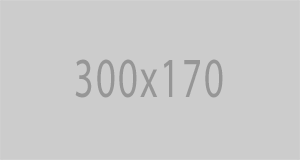
<style>
.page{position:relative;width:300px;height:160px;background:#cccccc}
.page>*{position:absolute;margin:0}
.t1{font:57px "MyriadPro-Regular";letter-spacing:0.07em;color:#969696;scale:0.68 1}
</style>
<div class="page">
<p class="t1" style="left:75px;top:59px;width:148px;height:39px">300x170</p>
</div>
